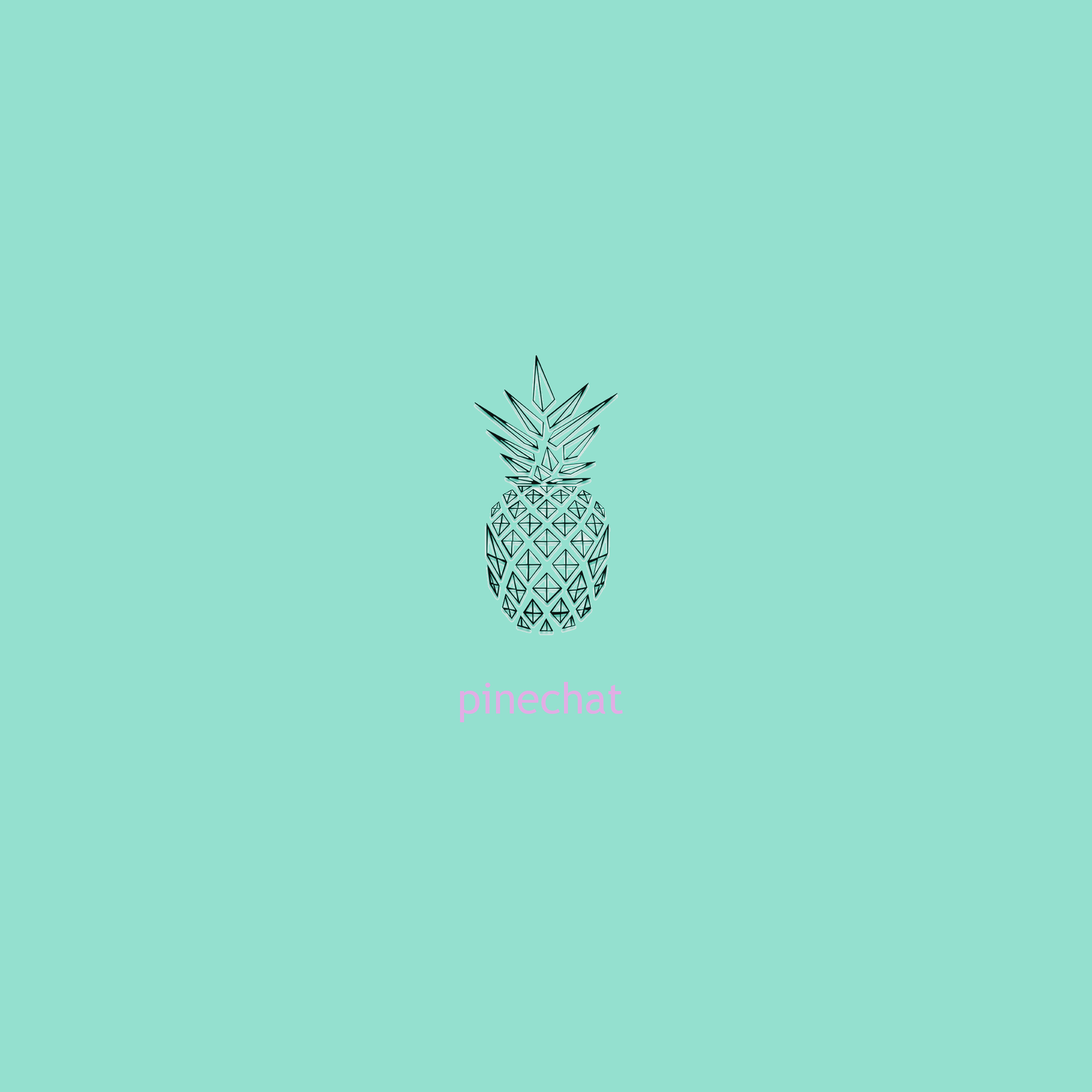
<style>
.page{position:relative;width:1092px;height:1092px;background:#94e0cf}
.page>*{position:absolute;margin:0}
.t1{font:42.8px "TrebuchetMS";color:#e1aee5}
</style>
<div class="page">
<p class="t1" style="left:460px;top:682px;width:163px;height:40px">pinechat</p>
</div>
